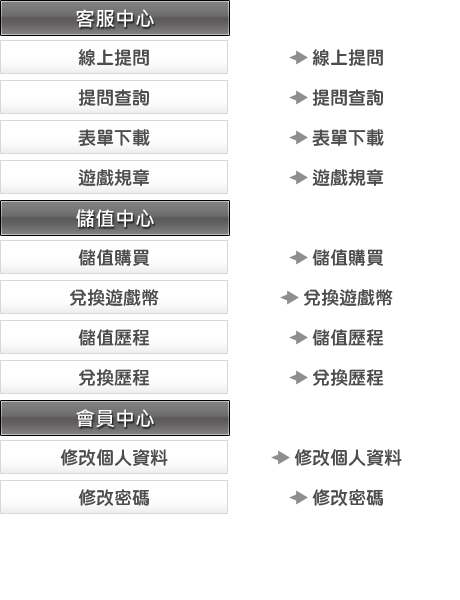
<style>
.page{position:relative;width:460px;height:600px;background:#ffffff}
.page>*{position:absolute;margin:0}
.t1{font:18px "DFYuanStd-W8";color:#4d4d4d}
.t2{font:20px "MicrosoftJhengHeiBold";color:#ffffff}
</style>
<div class="page">
<p class="t1" style="left:78px;top:169px;width:72px;height:17px">遊戲規章</p>
<p class="t1" style="left:312px;top:169px;width:72px;height:17px">遊戲規章</p>
<p class="t2" style="left:76px;top:209px;width:78px;height:18px">儲值中心</p>
<p class="t1" style="left:78px;top:249px;width:71px;height:17px">儲值購買</p>
<p class="t1" style="left:312px;top:249px;width:71px;height:17px">儲值購買</p>
<p class="t1" style="left:70px;top:289px;width:89px;height:17px">兌換遊戲幣</p>
<p class="t1" style="left:304px;top:289px;width:89px;height:17px">兌換遊戲幣</p>
<p class="t1" style="left:78px;top:329px;width:72px;height:17px">儲值歷程</p>
<p class="t1" style="left:312px;top:329px;width:72px;height:17px">儲值歷程</p>
<p class="t1" style="left:79px;top:369px;width:71px;height:17px">兌換歷程</p>
<p class="t1" style="left:313px;top:369px;width:71px;height:17px">兌換歷程</p>
<p class="t2" style="left:76px;top:409px;width:78px;height:19px">會員中心</p>
<p class="t1" style="left:60px;top:449px;width:108px;height:17px">修改個人資料</p>
<p class="t1" style="left:294px;top:449px;width:108px;height:17px">修改個人資料</p>
<p class="t1" style="left:78px;top:489px;width:71px;height:17px">修改密碼</p>
<p class="t1" style="left:312px;top:489px;width:71px;height:17px">修改密碼</p>
</div>
